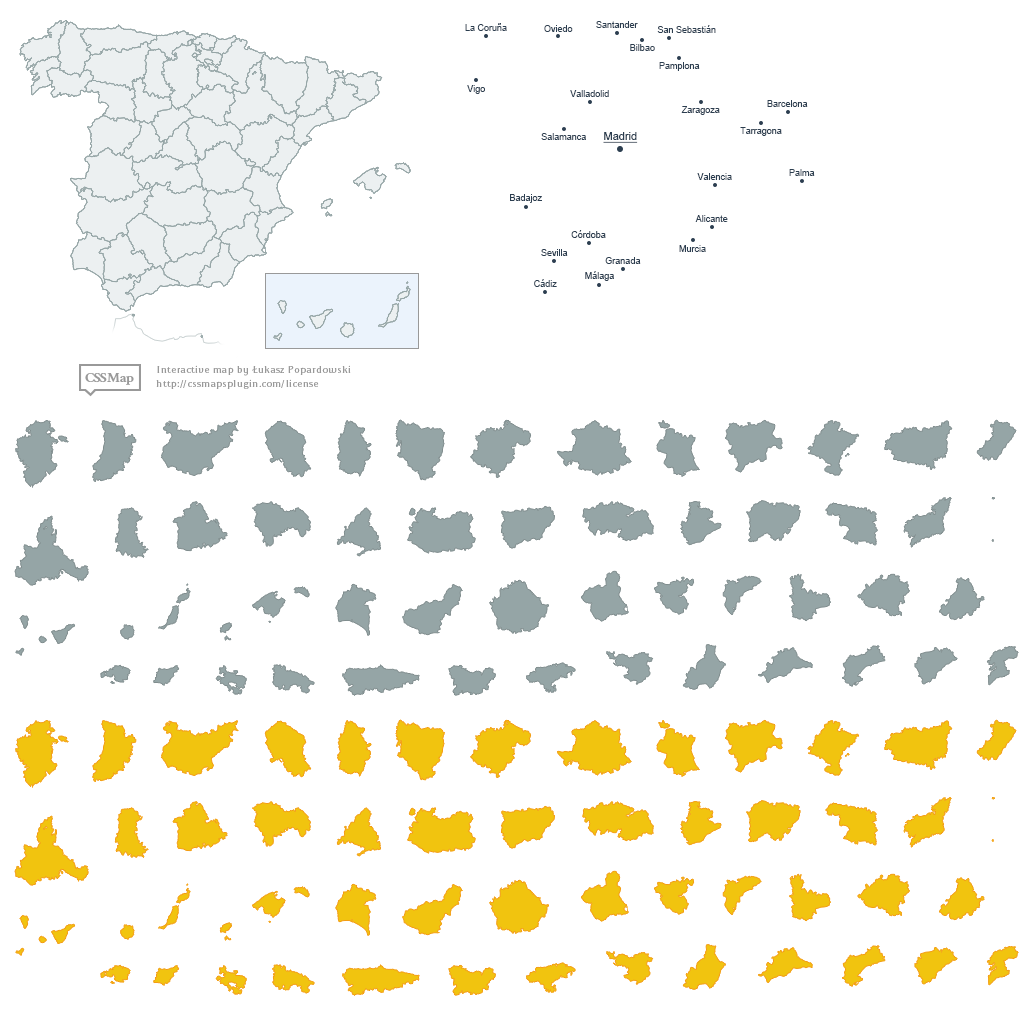
<style>
.page{position:relative;width:1034px;height:1011px;background:#ffffff}
.page>*{position:absolute;margin:0}
.t1{font:9px "ArialMT";color:#2c3e50}
.t2{font:11px "ArialMT";color:#2c3e50;text-decoration:underline}
</style>
<div class="page">
<p class="t1" style="left:465px;top:23px;width:42px;height:8px">La Coruña</p>
<p class="t1" style="left:544px;top:25px;width:29px;height:7px">Oviedo</p>
<p class="t1" style="left:596px;top:21px;width:42px;height:7px">Santander</p>
<p class="t1" style="left:657px;top:25px;width:59px;height:8px">San Sebastián</p>
<p class="t1" style="left:630px;top:44px;width:25px;height:7px">Bilbao</p>
<p class="t1" style="left:659px;top:62px;width:41px;height:9px">Pamplona</p>
<p class="t1" style="left:467px;top:85px;width:18px;height:9px">Vigo</p>
<p class="t1" style="left:570px;top:90px;width:39px;height:7px">Valladolid</p>
<p class="t1" style="left:767px;top:100px;width:41px;height:7px">Barcelona</p>
<p class="t1" style="left:681px;top:106px;width:39px;height:9px">Zaragoza</p>
<p class="t1" style="left:541px;top:133px;width:45px;height:7px">Salamanca</p>
<p class="t2" style="left:603px;top:132px;width:35px;height:11px">Madrid</p>
<p class="t1" style="left:740px;top:127px;width:42px;height:9px">Tarragona</p>
<p class="t1" style="left:697px;top:173px;width:35px;height:7px">Valencia</p>
<p class="t1" style="left:789px;top:169px;width:26px;height:7px">Palma</p>
<p class="t1" style="left:510px;top:194px;width:32px;height:9px">Badajoz</p>
<p class="t1" style="left:695px;top:215px;width:33px;height:7px">Alicante</p>
<p class="t1" style="left:571px;top:230px;width:35px;height:8px">Córdoba</p>
<p class="t1" style="left:679px;top:245px;width:27px;height:7px">Murcia</p>
<p class="t1" style="left:541px;top:249px;width:27px;height:7px">Sevilla</p>
<p class="t1" style="left:605px;top:257px;width:36px;height:7px">Granada</p>
<p class="t1" style="left:534px;top:279px;width:23px;height:8px">Cádiz</p>
<p class="t1" style="left:585px;top:271px;width:29px;height:10px">Málaga</p>
</div>
